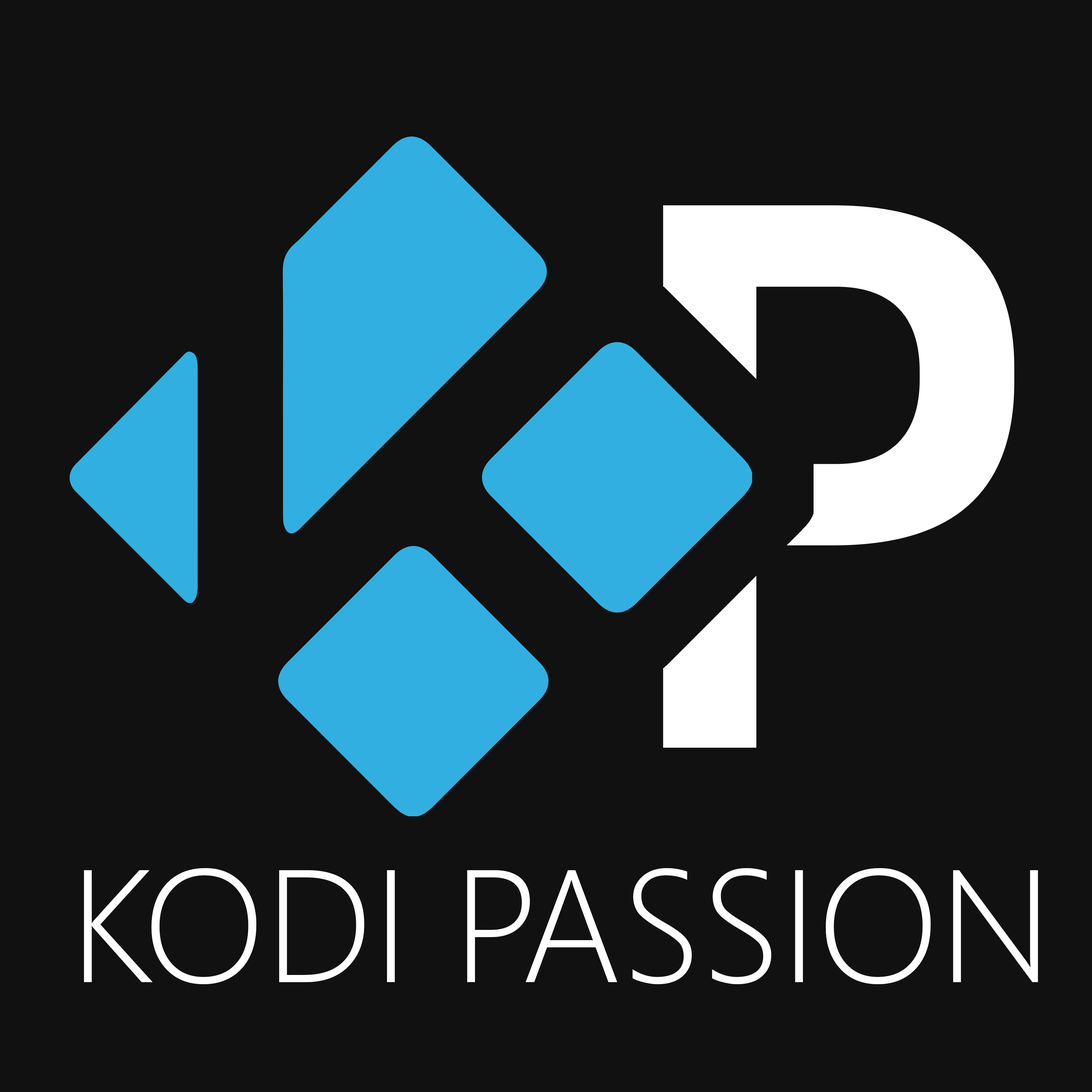
<style>
.page{position:relative;width:1092px;height:1092px;background:#111111}
.page>*{position:absolute;margin:0}
.t1{font:159.9px "SegoeUI-Light";color:#ffffff}
</style>
<div class="page">
<p class="t1" style="left:84px;top:868px;width:954px;height:116px">KODI PASSION</p>
</div>
